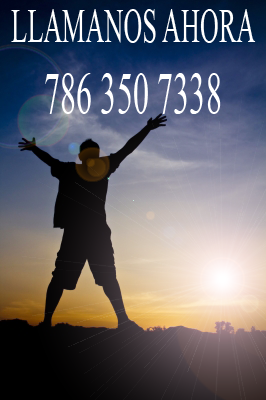
<style>
.page{position:relative;width:266px;height:400px}
.page>*{position:absolute;margin:0}
.t1{font:48.6px "TimesNewRomanPSMT";color:#ffffff;scale:0.54 1}
.t2{font:60px "TimesNewRomanPSMT";color:#ffffff;scale:0.54 1}
</style>
<div class="page">
<p class="t1" style="left:11px;top:9px;width:245px;height:105px">LLAMANOS AHORA<br><span class="t2">    786 350 7338</span></p>
</div>
